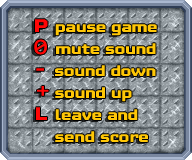
<style>
.page{position:relative;width:192px;height:160px}
.page>*{position:absolute;margin:0}
.t1{font:18px/22px "MTV2C";color:#ffc706;scale:1.2 1}
.t2{font:22px/22px "MTV2C";color:#ff0606;scale:1.2 1}
.t3{font:22px/22px "Consolas";color:#ff0606;font-weight:bold;scale:1.2 1}
</style>
<div class="page">
<p class="t1" style="left:34px;top:19px;width:123px;height:123px"><span class="t2">P </span>pause game<br><span class="t3">0 </span>mute sound<br><span class="t2">- </span>sound down<br><span class="t2">+ </span>sound up<br><span class="t2">L </span>leave and<br>    send score</p>
</div>
